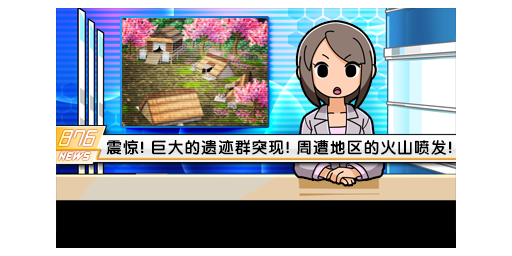
<style>
.page{position:relative;width:512px;height:256px;background:#ffffff}
.page>*{position:absolute;margin:0}
.t1{font:16px "FZY4K--GBK1-0";letter-spacing:0.05em;color:#000000}
</style>
<div class="page">
<p class="t1" style="left:106px;top:139px;width:346px;height:16px">震惊! 巨大的遗迹群突现! 周遭地区的火山喷发!</p>
</div>
